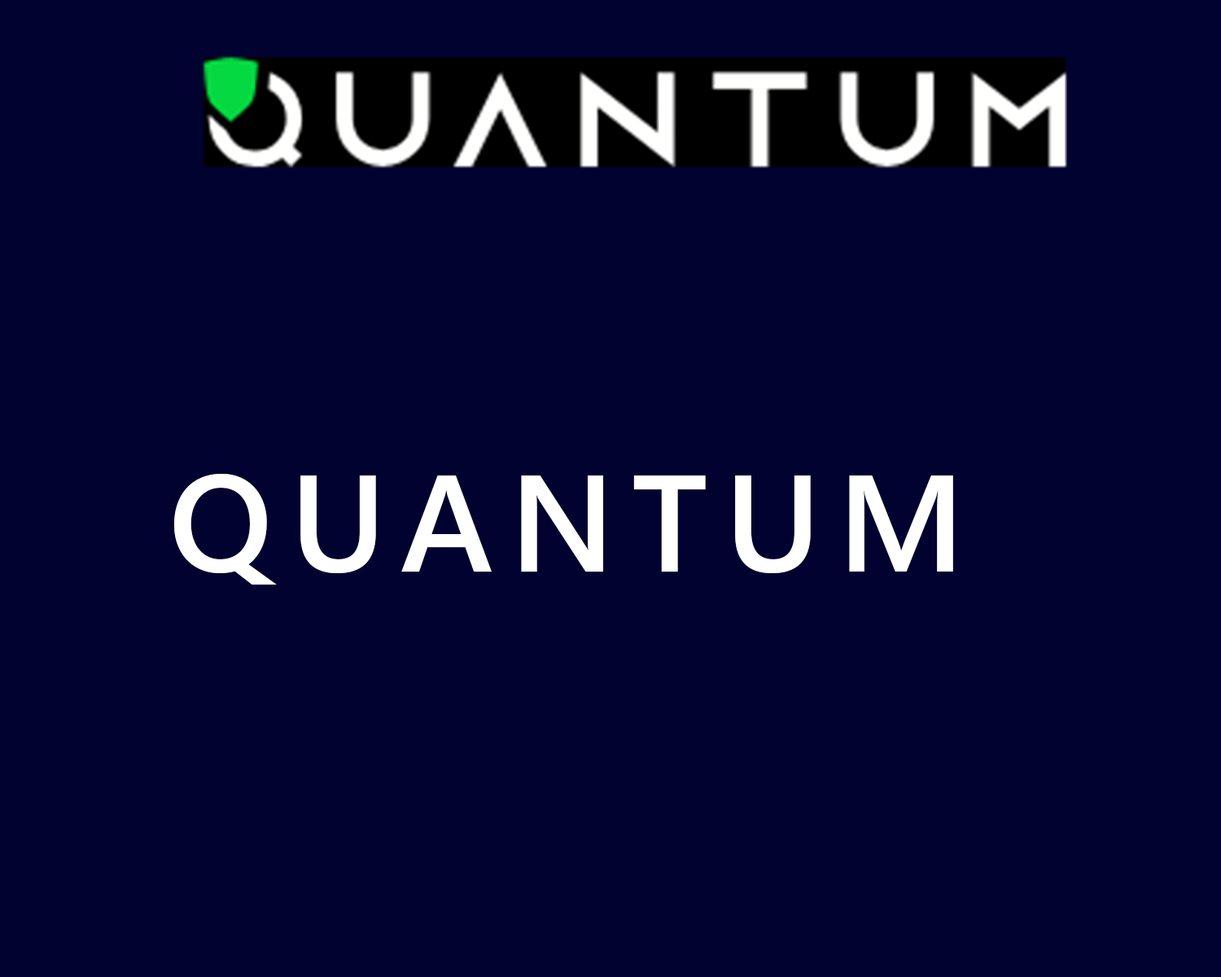
<style>
.page{position:relative;width:1221px;height:977px;background:#01022f}
.page>*{position:absolute;margin:0}
.t1{font:137.9px "SegoeUI-Semibold";letter-spacing:0.12em;color:#ffffff}
</style>
<div class="page">
<p class="t1" style="left:174px;top:474px;width:779px;height:110px">QUANTUM</p>
</div>
